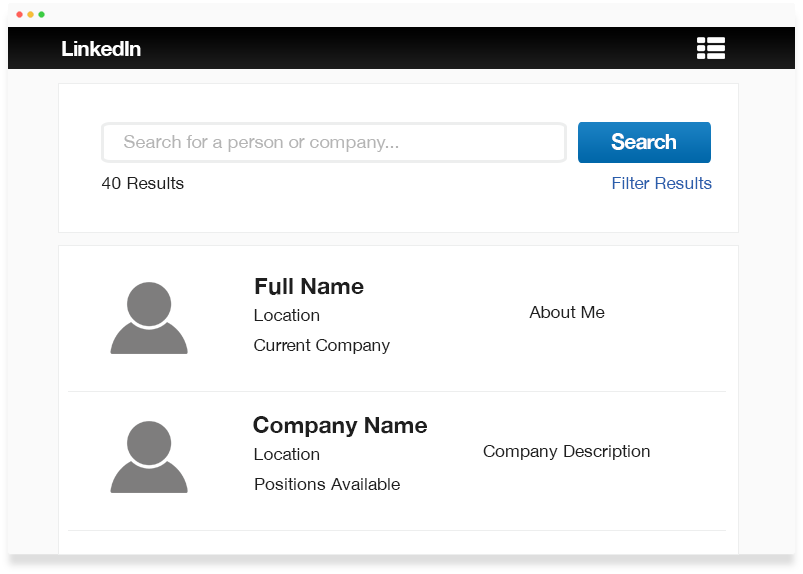
<style>
.page{position:relative;width:803px;height:574px;background:#ffffff}
.page>*{position:absolute;margin:0}
.t1{font:21.3px "HelveticaNeue-Bold";letter-spacing:-0.04em;color:#ffffff}
.t2{font:18.3px "HelveticaNeue";color:#b5b5b5}
.t3{font:17.3px "HelveticaNeue";color:#1f1f1f}
.t4{font:17.3px "HelveticaNeue";color:#2a5eac}
.t5{font:23.3px "HelveticaNeue-Bold";color:#1f1f1f}
</style>
<div class="page">
<p class="t1" style="left:62px;top:41px;width:79px;height:15px">LinkedIn</p>
<p class="t2" style="left:124px;top:135px;width:275px;height:17px">Search for a person or company...</p>
<p class="t1" style="left:611px;top:133px;width:65px;height:17px">Search</p>
<p class="t3" style="left:101px;top:177px;width:83px;height:12px">40 Results</p>
<p class="t4" style="left:612px;top:177px;width:100px;height:12px">Filter Results</p>
<p class="t5" style="left:255px;top:278px;width:109px;height:17px">Full Name</p>
<p class="t3" style="left:254px;top:309px;width:66px;height:12px">Location</p>
<p class="t3" style="left:529px;top:306px;width:76px;height:12px">About Me</p>
<p class="t3" style="left:254px;top:339px;width:136px;height:15px">Current Company</p>
<p class="t5" style="left:253px;top:416px;width:174px;height:21px">Company Name</p>
<p class="t3" style="left:254px;top:448px;width:66px;height:12px">Location</p>
<p class="t3" style="left:483px;top:445px;width:167px;height:15px">Company Description</p>
<p class="t3" style="left:255px;top:478px;width:145px;height:12px">Positions Available</p>
</div>
